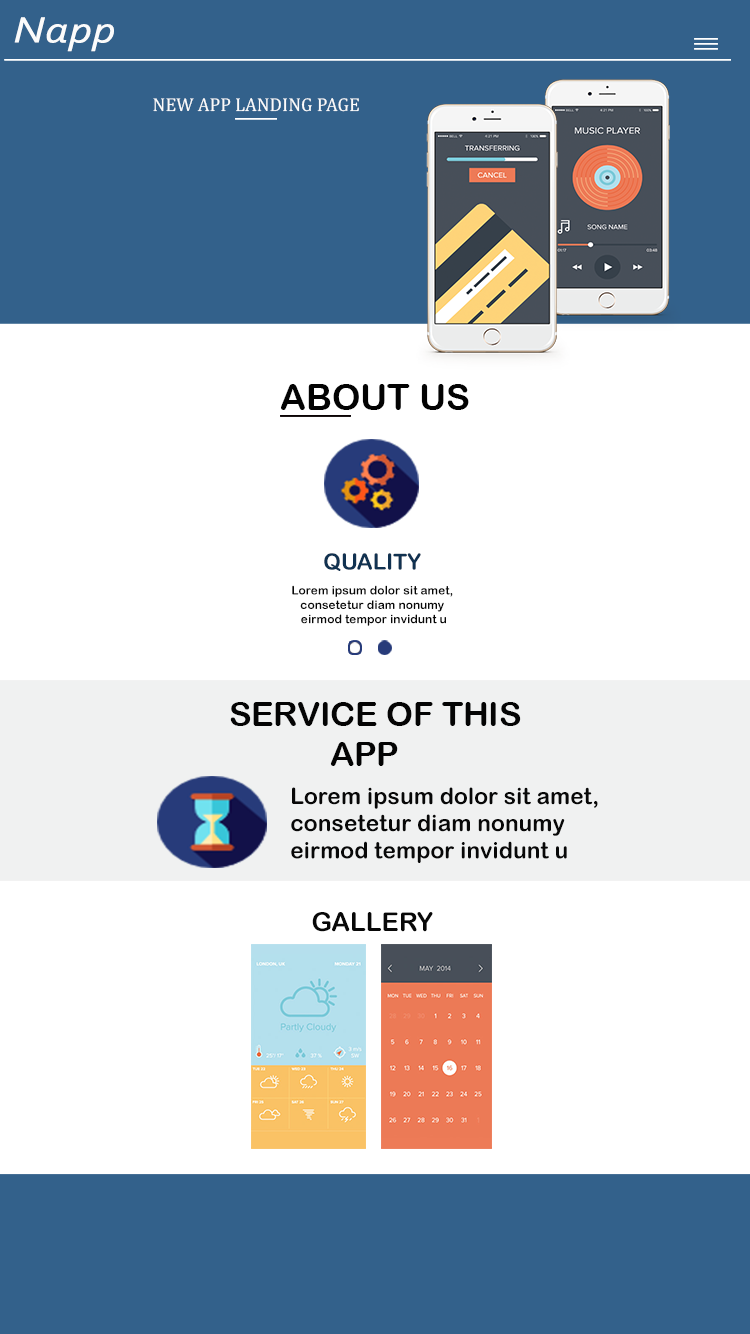
<style>
.page{position:relative;width:750px;height:1334px;background:#ffffff}
.page>*{position:absolute;margin:0}
.t1{font:38.3px "Corbel-Italic";color:#fbfbfb;scale:1.23 1}
.t2{font:18.8px "Cambria";color:#fbfbfb}
.t3{font:35.8px "ArialRoundedMTBold";color:#030303}
.t4{font:22.4px "ArialRoundedMTBold";color:#113251}
.t5{font:11.9px "ArialRoundedMTBold";letter-spacing:0.005em;color:#080808}
.t6{font:33.7px "ArialRoundedMTBold";color:#040404}
.t7{font:22.7px "ArialRoundedMTBold";letter-spacing:0.005em;color:#080808}
.t8{font:25.9px "ArialRoundedMTBold";letter-spacing:0.005em;color:#080808}
</style>
<div class="page">
<p class="t1" style="left:14px;top:17px;width:100px;height:35px">Napp</p>
<p class="t2" style="left:153px;top:98px;width:206px;height:14px">NEW APP LANDING PAGE</p>
<p class="t3" style="left:281px;top:384px;width:188px;height:26px">ABOUT US</p>
<p class="t4" style="left:324px;top:553px;width:97px;height:18px">QUALITY</p>
<p class="t5" style="left:292px;top:585px;width:161px;height:41px;text-align:center">Lorem ipsum dolor sit amet, <br>consetetur diam nonumy <br>eirmod tempor invidunt u</p>
<p class="t6" style="left:230px;top:702px;width:291px;height:64px">SERVICE OF THIS<br>            APP</p>
<p class="t7" style="left:291px;top:787px;width:307px;height:76px">Lorem ipsum dolor sit amet, <br>consetetur diam nonumy <br>eirmod tempor invidunt u</p>
<p class="t8" style="left:312px;top:912px;width:121px;height:20px">GALLERY</p>
</div>
